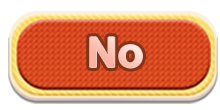
<style>
.page{position:relative;width:220px;height:110px;background:#ffffff}
.page>*{position:absolute;margin:0}
.t1{font:41.4px "Arial-BoldMT";color:#fbc2b4}
</style>
<div class="page">
<p class="t1" style="left:90px;top:37px;width:52px;height:31px">No</p>
<p class="t1" style="left:90px;top:37px;width:52px;height:31px">No</p>
</div>
